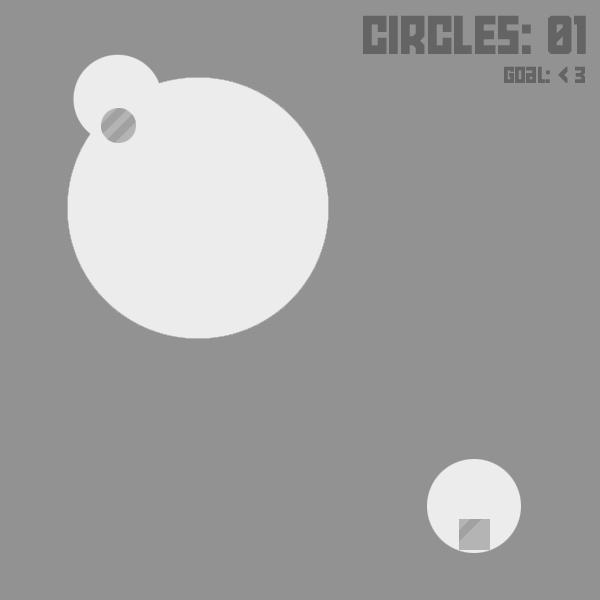
<style>
.page{position:relative;width:600px;height:600px;background:#929292}
.page>*{position:absolute;margin:0}
.t1{font:94px "Power-Grid";color:#646464}
.t2{font:40.2px "Power-Grid";color:#646464}
</style>
<div class="page">
<p class="t1" style="left:363px;top:15px;width:223px;height:39px">Circles: 01</p>
<p class="t2" style="left:504px;top:66px;width:81px;height:17px">Goal: &lt; 3</p>
</div>
